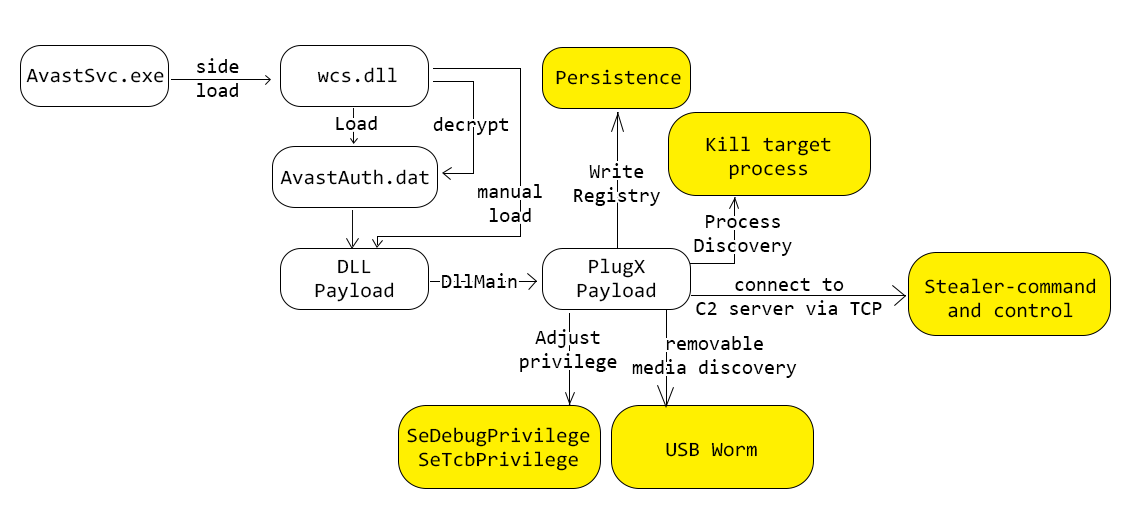
<style>
.page{position:relative;width:1146px;height:521px;background:#ffffff}
.page>*{position:absolute;margin:0}
.t1{font:20px "Consolas";color:#000000}
.t2{font:20.5px "Consolas";color:#000000}
</style>
<div class="page">
<p class="t1" style="left:197px;top:58px;width:42px;height:39px">side<br>load</p>
<p class="t2" style="left:26px;top:68px;width:138px;height:15px">AvastSvc.exe</p>
<p class="t2" style="left:317px;top:67px;width:80px;height:16px">wcs.dll</p>
<p class="t2" style="left:556px;top:69px;width:125px;height:16px">Persistence</p>
<p class="t1" style="left:336px;top:116px;width:41px;height:14px">Load</p>
<p class="t1" style="left:433px;top:117px;width:76px;height:18px">decrypt</p>
<p class="t2" style="left:706px;top:136px;width:125px;height:44px;text-align:center">Kill target<br>process</p>
<p class="t2" style="left:280px;top:169px;width:149px;height:16px">AvastAuth.dat</p>
<p class="t1" style="left:574px;top:163px;width:86px;height:43px;text-align:center">Write<br>Registry</p>
<p class="t1" style="left:478px;top:184px;width:64px;height:38px;text-align:center">manual<br>load</p>
<p class="t1" style="left:694px;top:215px;width:98px;height:41px;text-align:center">Process<br>Discovery</p>
<p class="t2" style="left:315px;top:259px;width:79px;height:43px;text-align:center">DLL<br>Payload</p>
<p class="t2" style="left:577px;top:258px;width:79px;height:44px;text-align:center">PlugX<br>Payload</p>
<p class="t1" style="left:442px;top:273px;width:75px;height:15px">DllMain</p>
<p class="t1" style="left:696px;top:278px;width:186px;height:37px;text-align:center">connect to<br>C2 server via TCP</p>
<p class="t2" style="left:925px;top:278px;width:171px;height:40px;text-align:center">Stealer-command<br>and control</p>
<p class="t1" style="left:520px;top:329px;width:97px;height:43px;text-align:center">Adjust<br>privilege</p>
<p class="t1" style="left:632px;top:336px;width:165px;height:42px;text-align:center">removable<br>media discovery</p>
<p class="t2" style="left:407px;top:427px;width:183px;height:44px;text-align:center">SeDebugPrivilege<br>SeTcbPrivilege</p>
<p class="t2" style="left:666px;top:442px;width:91px;height:15px">USB Worm</p>
</div>
